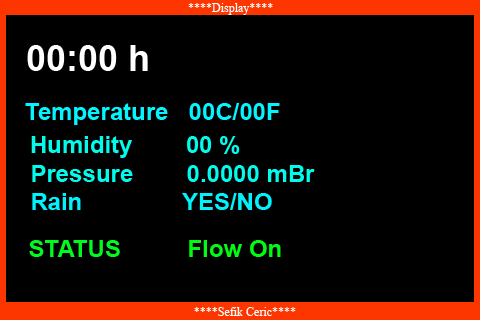
<style>
.page{position:relative;width:480px;height:320px;background:#000000}
.page>*{position:absolute;margin:0}
.t1{font:12px "TimesNewRomanPSMT";color:#ffffff}
.t2{font:36px "Arial-BoldMT";color:#ffffff}
.t3{font:24px "Arial-BoldMT";color:#01f6ff}
.t4{font:24px "Arial-BoldMT";color:#00fced}
.t5{font:24px "Arial-BoldMT";color:#00f3fc}
.t6{font:24px "Arial-BoldMT";color:#00fc12}
.t7{font:24px "Arial-BoldMT";color:#00fc1e}
</style>
<div class="page">
<p class="t1" style="left:188px;top:3px;width:85px;height:12px">****Display****</p>
<p class="t2" style="left:27px;top:45px;width:121px;height:26px">00:00 h</p>
<p class="t3" style="left:25px;top:103px;width:255px;height:22px">Temperature   00C/00F</p>
<p class="t4" style="left:31px;top:136px;width:209px;height:22px">Humidity        00 %</p>
<p class="t4" style="left:32px;top:165px;width:283px;height:17px">Pressure        0.0000 mBr</p>
<p class="t5" style="left:32px;top:193px;width:240px;height:17px">Rain               YES/NO</p>
<p class="t6" style="left:29px;top:240px;width:252px;height:17px"><span class="t7">STATUS          </span>Flow On</p>
<p class="t1" style="left:194px;top:307px;width:102px;height:9px">****Sefik Ceric****</p>
</div>
